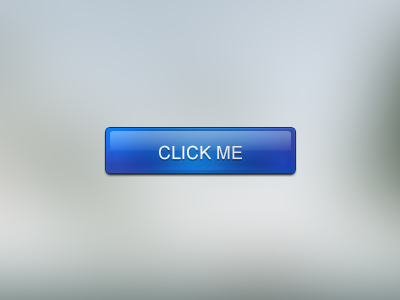
<style>
.page{position:relative;width:400px;height:300px}
.page>*{position:absolute;margin:0}
.t1{font:18px "ArialMT";color:#e8f1f1}
</style>
<div class="page">
<p class="t1" style="left:159px;top:145px;width:83px;height:15px">CLICK ME</p>
</div>
